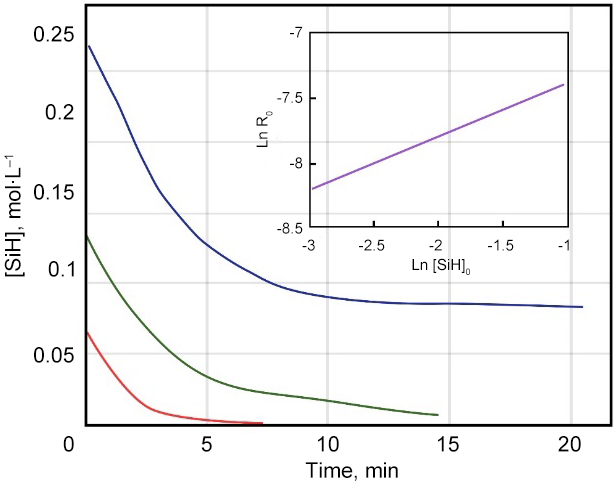
<style>
.page{position:relative;width:616px;height:484px;background:#ffffff}
.page>*{position:absolute;margin:0}
.t1{font:21.4px "ArialMT";color:#000000}
.t2{font:15.3px "ArialMT";color:#000000}
</style>
<div class="page">
<p class="t1" style="left:34px;top:26px;width:40px;height:16px">0.25</p>
<p class="t2" style="left:277px;top:26px;width:26px;height:208px;text-align:right">-7<br>-7.5<br>-8<br>-8.5</p>
<p class="t1" style="left:45px;top:104px;width:29px;height:16px">0.2</p>
<p class="t2" style="left:256px;top:111px;width:17px;height:36px;rotate:-90deg">Ln R0</p>
<p class="t1" style="left:4px;top:155px;width:21px;height:122px;rotate:-90deg">[SiH], mol∙L–1</p>
<p class="t1" style="left:34px;top:184px;width:40px;height:16px">0.15</p>
<p class="t2" style="left:302px;top:239px;width:13px;height:12px">-3</p>
<p class="t2" style="left:359px;top:239px;width:26px;height:12px">-2.5</p>
<p class="t2" style="left:429px;top:239px;width:13px;height:12px">-2</p>
<p class="t2" style="left:488px;top:239px;width:26px;height:12px">-1.5</p>
<p class="t2" style="left:558px;top:239px;width:11px;height:12px">-1</p>
<p class="t1" style="left:48px;top:261px;width:26px;height:16px">0.1</p>
<p class="t2" style="left:412px;top:258px;width:58px;height:17px">Ln [SiH]0</p>
<p class="t1" style="left:34px;top:347px;width:40px;height:16px">0.05</p>
<p class="t1" style="left:63px;top:436px;width:11px;height:16px">0</p>
<p class="t1" style="left:201px;top:436px;width:11px;height:16px">5</p>
<p class="t1" style="left:318px;top:436px;width:21px;height:16px">10</p>
<p class="t1" style="left:438px;top:436px;width:21px;height:16px">15</p>
<p class="t1" style="left:558px;top:436px;width:23px;height:16px">20</p>
<p class="t1" style="left:305px;top:462px;width:93px;height:19px">Time, min</p>
</div>
